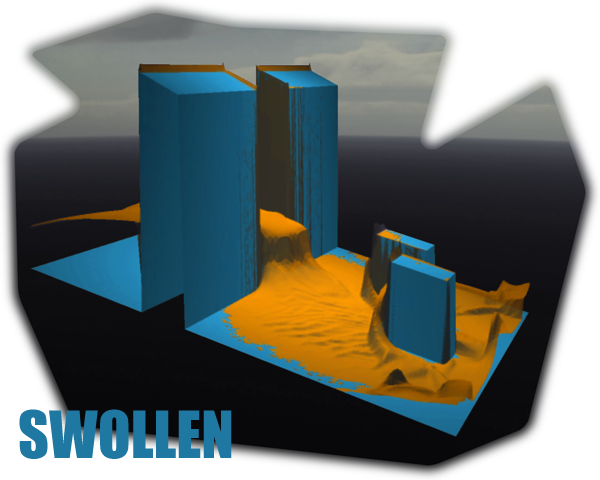
<style>
.page{position:relative;width:600px;height:480px}
.page>*{position:absolute;margin:0}
.t1{font:60px "Impact";color:#1f78a2}
</style>
<div class="page">
<p class="t1" style="left:19px;top:409px;width:213px;height:50px">SWOLLEN</p>
</div>
